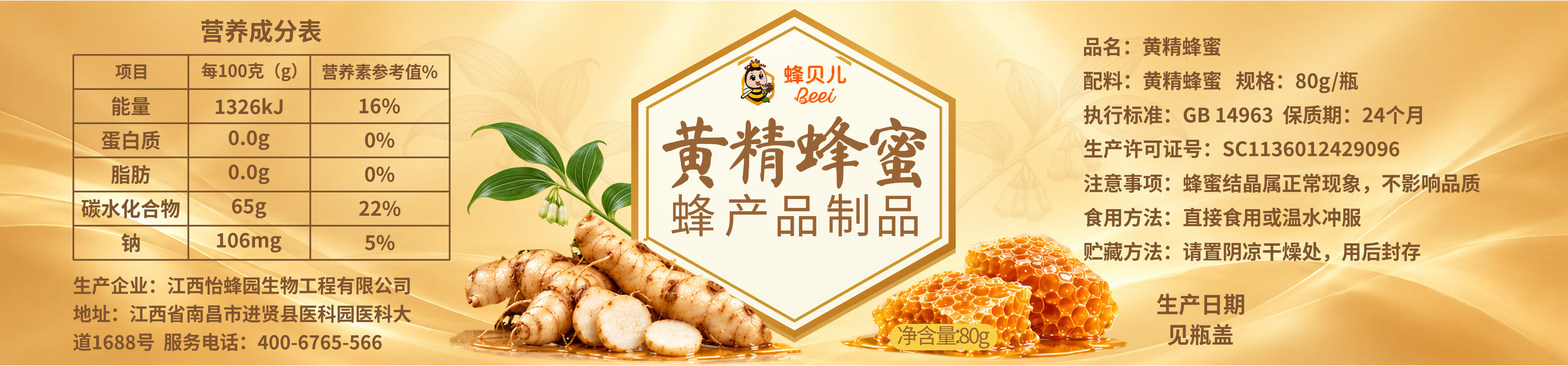
<style>
.page{position:relative;width:1568px;height:366px}
.page>*{position:absolute;margin:0}
.t1{font:24.4px "NotoSansCJKsc-Bold";color:#80542f}
.t2{font:19.9px "NotoSansCJKsc-Bold";color:#80542f}
.t3{font:16.7px "NotoSansCJKsc-Bold";color:#80542f}
.t4{font:76.1px "MaShanZheng-Regular";letter-spacing:-0.121em;color:#996435}
.t5{font:76.1px "MaShanZheng-Regular";letter-spacing:-0.08em;color:#996435}
.t6{font:76.1px "MaShanZheng-Regular";letter-spacing:-0.134em;color:#996435}
.t7{font:76.1px "MaShanZheng-Regular";color:#996435}
.t8{font:45.9px "NotoSansCJKsc-Regular";letter-spacing:0.182em;color:#996435}
.t9{font:45.9px "NotoSansCJKsc-Regular";letter-spacing:0.085em;color:#996435}
.t10{font:45.9px "NotoSansCJKsc-Regular";letter-spacing:0.124em;color:#996435}
.t11{font:45.9px "NotoSansCJKsc-Regular";color:#996435}
.t12{font:18.8px "NotoSansCJKsc-Bold";color:#80542f}
.t13{font:22.3px "NotoSansCJKsc-Bold";color:#80542f}
.t14{font:21.1px "NotoSansCJKsc-Regular";letter-spacing:-0.074em;color:#996435}
.t15{font:21.1px "NotoSansCJKsc-Regular";letter-spacing:-0.215em;color:#996435}
.t16{font:21.1px "NotoSansCJKsc-Regular";letter-spacing:-0.716em;color:#996435}
.t17{font:21.1px "NotoSansCJKsc-Regular";letter-spacing:-0.092em;color:#996435}
.t18{font:21.1px "NotoSansCJKsc-Regular";letter-spacing:-0.096em;color:#996435}
.t19{font:21.1px "NotoSansCJKsc-Regular";color:#996435}
</style>
<div class="page">
<p class="t1" style="left:201px;top:19px;width:121px;height:24px">营养成分表</p>
<p class="t2" style="left:1084px;top:37px;width:137px;height:19px">品名：黄精蜂蜜</p>
<p class="t3" style="left:115px;top:64px;width:31px;height:16px">项目</p>
<p class="t3" style="left:201px;top:62px;width:96px;height:19px">每100克（g）</p>
<p class="t3" style="left:322px;top:63px;width:116px;height:17px">营养素参考值%</p>
<p class="t2" style="left:1084px;top:71px;width:274px;height:22px">配料：黄精蜂蜜   规格：80g/瓶</p>
<p class="t2" style="left:112px;top:97px;width:38px;height:19px">能量</p>
<p class="t2" style="left:216px;top:98px;width:67px;height:16px">1326kJ</p>
<p class="t2" style="left:359px;top:98px;width:41px;height:16px">16%</p>
<p class="t2" style="left:1084px;top:105px;width:338px;height:20px">执行标准：GB 14963  保质期：24个月</p>
<p class="t4" style="left:662px;top:116px;width:265px;height:73px">黄<span class="t5">精</span><span class="t6">蜂</span><span class="t7">蜜</span></p>
<p class="t2" style="left:101px;top:131px;width:59px;height:19px">蛋白质</p>
<p class="t2" style="left:229px;top:130px;width:41px;height:20px">0.0g</p>
<p class="t2" style="left:365px;top:132px;width:29px;height:16px">0%</p>
<p class="t2" style="left:1084px;top:139px;width:315px;height:20px">生产许可证号：SC1136012429096</p>
<p class="t2" style="left:111px;top:164px;width:39px;height:20px">脂肪</p>
<p class="t2" style="left:229px;top:164px;width:41px;height:20px">0.0g</p>
<p class="t2" style="left:365px;top:167px;width:29px;height:15px">0%</p>
<p class="t2" style="left:1084px;top:173px;width:396px;height:21px">注意事项：蜂蜜结晶属正常现象，不影响品质</p>
<p class="t8" style="left:671px;top:193px;width:247px;height:44px">蜂<span class="t9">产</span><span class="t10">品</span><span class="t9">制</span><span class="t11">品</span></p>
<p class="t2" style="left:81px;top:199px;width:99px;height:19px">碳水化合物</p>
<p class="t2" style="left:232px;top:199px;width:34px;height:19px">65g</p>
<p class="t2" style="left:359px;top:201px;width:42px;height:15px">22%</p>
<p class="t2" style="left:1084px;top:207px;width:277px;height:20px">食用方法：直接食用或温水冲服</p>
<p class="t2" style="left:121px;top:233px;width:19px;height:19px">钠</p>
<p class="t2" style="left:217px;top:233px;width:65px;height:20px">106mg</p>
<p class="t2" style="left:365px;top:235px;width:30px;height:15px">5%</p>
<p class="t2" style="left:1084px;top:241px;width:336px;height:21px">贮藏方法：请置阴凉干燥处，用后封存</p>
<p class="t12" style="left:73px;top:276px;width:337px;height:19px">生产企业：江西怡蜂园生物工程有限公司</p>
<p class="t13" style="left:1157px;top:293px;width:87px;height:22px">生产日期</p>
<p class="t12" style="left:73px;top:304px;width:338px;height:19px">地址：江西省南昌市进贤县医科园医科大</p>
<p class="t14" style="left:898px;top:325px;width:92px;height:23px">净含<span class="t15">量</span><span class="t16">：</span><span class="t17">8</span><span class="t18">0</span><span class="t19">g</span></p>
<p class="t13" style="left:1168px;top:324px;width:65px;height:21px">见瓶盖</p>
<p class="t12" style="left:73px;top:332px;width:309px;height:19px">道1688号  服务电话：400-6765-566</p>
</div>
